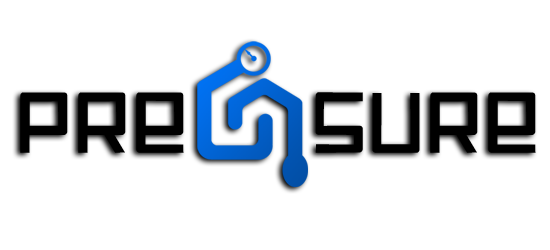
<style>
.page{position:relative;width:550px;height:250px;background:#ffffff}
.page>*{position:absolute;margin:0}
.t1{font:83.3px "EspacioCuadrado";color:#000000}
</style>
<div class="page">
<p class="t1" style="left:20px;top:92px;width:164px;height:61px">pre</p>
<p class="t1" style="left:315px;top:92px;width:221px;height:61px">sure</p>
</div>
